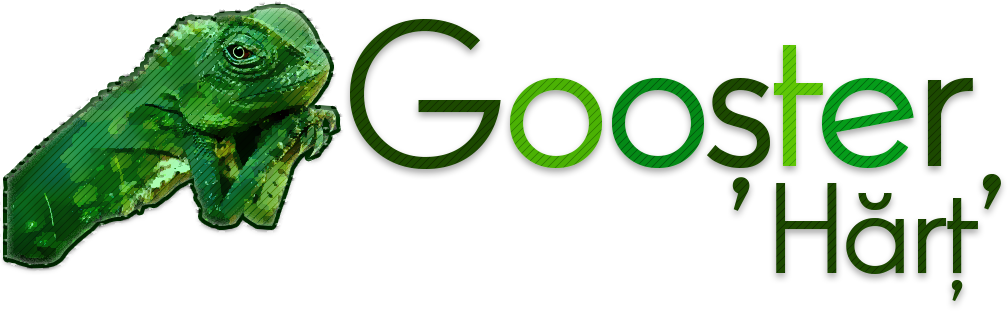
<style>
.page{position:relative;width:1008px;height:311px;background:#ffffff}
.page>*{position:absolute;margin:0}
.t1{font:200px "RelishPro-Regular7";letter-spacing:-0.05em;color:#163900}
.t2{font:200px "RelishPro-Regular7";letter-spacing:-0.05em;color:#3b9403}
.t3{font:200px "RelishPro-Regular7";letter-spacing:-0.05em;color:#036c11}
.t4{font:200px "RelishPro-Regular7";letter-spacing:-0.05em;color:#4ab004}
.t5{font:200px "RelishPro-Regular7";letter-spacing:-0.05em;color:#047b14}
.t6{font:125px "RelishPro-Regular7";letter-spacing:-0.05em;color:#163900}
</style>
<div class="page">
<p class="t1" style="left:350px;top:19px;width:623px;height:192px">G<span class="t2">o</span><span class="t3">o</span>ș<span class="t4">t</span><span class="t5">e</span>r</p>
<p class="t1" style="left:982px;top:173px;width:19px;height:37px;rotate:-180deg">‘</p>
<p class="t6" style="left:776px;top:183px;width:202px;height:118px">Hărț</p>
</div>
